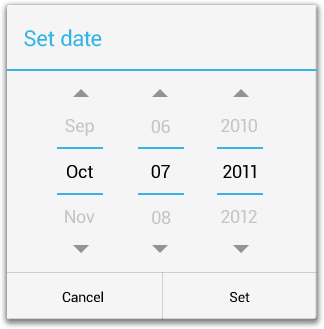
<style>
.page{position:relative;width:324px;height:329px;background:#f5f5f5}
.page>*{position:absolute;margin:0}
.t1{font:22px "Roboto-Regular";letter-spacing:-0.005em;color:#33b5e5}
.t2{font:18px "Roboto-Regular";letter-spacing:-0.005em;color:#c4c4c4}
.t3{font:18px "Roboto-Regular";letter-spacing:-0.005em;color:#000000}
.t4{font:14px "Roboto-Regular";letter-spacing:-0.005em;color:#000000}
</style>
<div class="page">
<p class="t1" style="left:24px;top:29px;width:78px;height:18px">Set date</p>
<p class="t2" style="left:65px;top:119px;width:29px;height:17px">Sep</p>
<p class="t2" style="left:151px;top:120px;width:19px;height:13px">06</p>
<p class="t2" style="left:221px;top:119px;width:36px;height:13px">2010</p>
<p class="t3" style="left:67px;top:165px;width:26px;height:13px">Oct</p>
<p class="t3" style="left:151px;top:165px;width:19px;height:13px">07</p>
<p class="t3" style="left:223px;top:165px;width:33px;height:13px">2011</p>
<p class="t2" style="left:65px;top:210px;width:30px;height:13px">Nov</p>
<p class="t2" style="left:152px;top:211px;width:19px;height:13px">08</p>
<p class="t2" style="left:221px;top:210px;width:36px;height:13px">2012</p>
<p class="t4" style="left:62px;top:291px;width:41px;height:12px">Cancel</p>
<p class="t4" style="left:230px;top:292px;width:20px;height:10px">Set</p>
</div>
